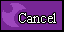
<style>
.page{position:relative;width:64px;height:32px;background:#772695}
.page>*{position:absolute;margin:0}
.t1{font:14px "TimesNewRomanPSMT";color:#ffffff}
</style>
<div class="page">
<p class="t1" style="left:19px;top:13px;width:37px;height:10px">Cancel</p>
</div>
